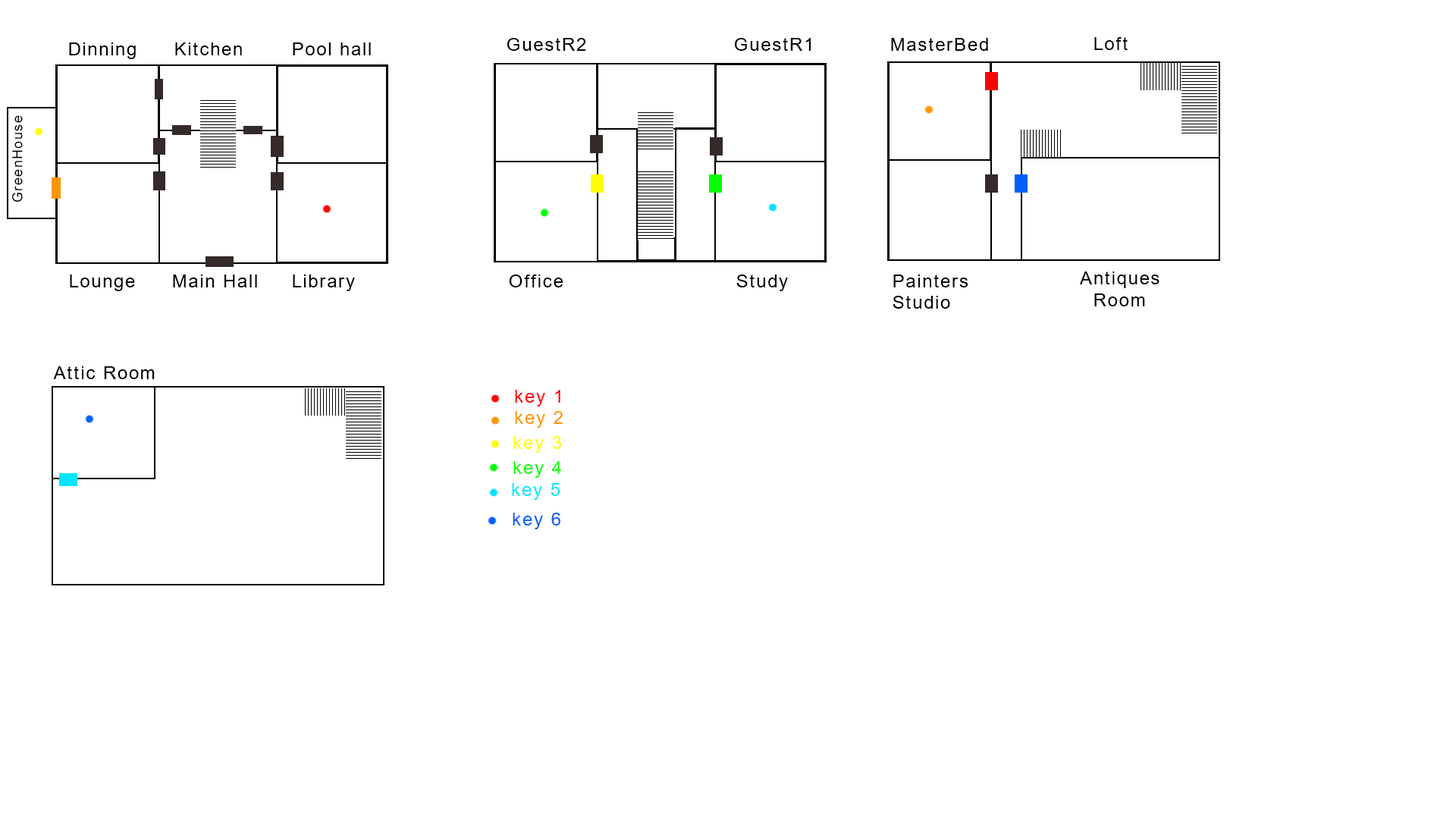
<style>
.page{position:relative;width:1456px;height:819px;background:#ffffff}
.page>*{position:absolute;margin:0}
.t1{font:18.2px "ArialMT";letter-spacing:0.08em;color:#000000}
.t2{font:13.6px "ArialMT";letter-spacing:0.08em;color:#000000}
.t3{font:18.2px "ArialMT";letter-spacing:0.08em;color:#ff0000}
.t4{font:18.2px "ArialMT";letter-spacing:0.08em;color:#ff9600}
.t5{font:18.2px "ArialMT";letter-spacing:0.08em;color:#fffc00}
.t6{font:18.2px "ArialMT";letter-spacing:0.08em;color:#06ff00}
.t7{font:18.2px "ArialMT";letter-spacing:0.08em;color:#00e4ff}
.t8{font:18.2px "ArialMT";letter-spacing:0.08em;color:#0060ff}
</style>
<div class="page">
<p class="t1" style="left:507px;top:38px;width:78px;height:13px">GuestR2</p>
<p class="t1" style="left:735px;top:38px;width:76px;height:13px">GuestR1</p>
<p class="t1" style="left:891px;top:38px;width:97px;height:13px">MasterBed</p>
<p class="t1" style="left:1094px;top:37px;width:34px;height:13px">Loft</p>
<p class="t1" style="left:69px;top:42px;width:67px;height:17px">Dinning</p>
<p class="t1" style="left:175px;top:42px;width:67px;height:13px">Kitchen</p>
<p class="t1" style="left:293px;top:42px;width:78px;height:13px">Pool hall</p>
<p class="t2" style="left:11px;top:115px;width:12px;height:87px;rotate:-90deg">GreenHouse</p>
<p class="t1" style="left:70px;top:275px;width:65px;height:16px">Lounge</p>
<p class="t1" style="left:173px;top:275px;width:84px;height:12px">Main Hall</p>
<p class="t1" style="left:293px;top:275px;width:62px;height:16px">Library</p>
<p class="t1" style="left:509px;top:275px;width:54px;height:12px">Office</p>
<p class="t1" style="left:736px;top:275px;width:52px;height:16px">Study</p>
<p class="t1" style="left:893px;top:275px;width:75px;height:34px">Painters<br>Studio</p>
<p class="t1" style="left:1080px;top:271px;width:79px;height:35px">Antiques<br>  Room</p>
<p class="t1" style="left:53px;top:366px;width:102px;height:13px">Attic Room</p>
<p class="t3" style="left:515px;top:390px;width:45px;height:16px">key 1</p>
<p class="t4" style="left:515px;top:411px;width:48px;height:17px">key 2</p>
<p class="t5" style="left:513px;top:436px;width:48px;height:17px">key 3</p>
<p class="t6" style="left:513px;top:461px;width:48px;height:17px">key 4</p>
<p class="t7" style="left:512px;top:483px;width:48px;height:17px">key 5</p>
<p class="t8" style="left:513px;top:513px;width:47px;height:16px">key 6</p>
</div>
